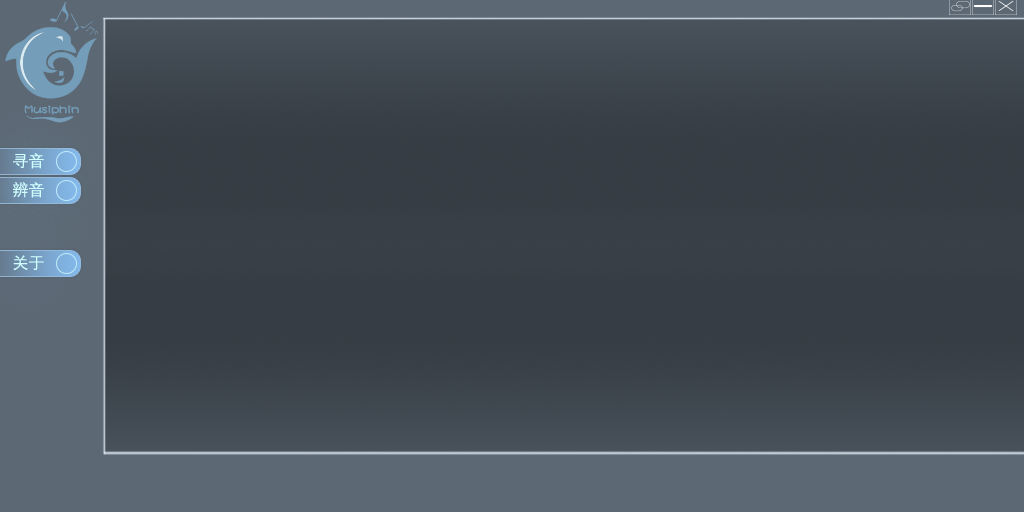
<style>
.page{position:relative;width:1024px;height:512px}
.page>*{position:absolute;margin:0}
.t1{font:16px "DengXian-Regular";color:#d0ffff}
.t2{font:16px "DengXian-Regular";color:#d1ffff}
</style>
<div class="page">
<p class="t1" style="left:13px;top:153px;width:31px;height:16px">寻音</p>
<p class="t2" style="left:13px;top:182px;width:31px;height:16px">辨音</p>
<p class="t1" style="left:13px;top:255px;width:31px;height:16px">关于</p>
</div>
